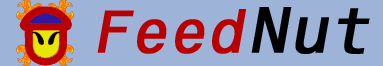
<style>
.page{position:relative;width:383px;height:66px;background:#9db3d8}
.page>*{position:absolute;margin:0}
.t1{font:59.8px "HE_TERMINAL-Roman";color:#b90000;font-weight:bold;font-style:italic}
.t2{font:64.8px "HE_TERMINAL-Roman";color:#000000;font-weight:bold;font-style:italic}
</style>
<div class="page">
<p class="t1" style="left:97px;top:7px;width:273px;height:47px">Feed <span class="t2">Nut</span></p>
</div>
